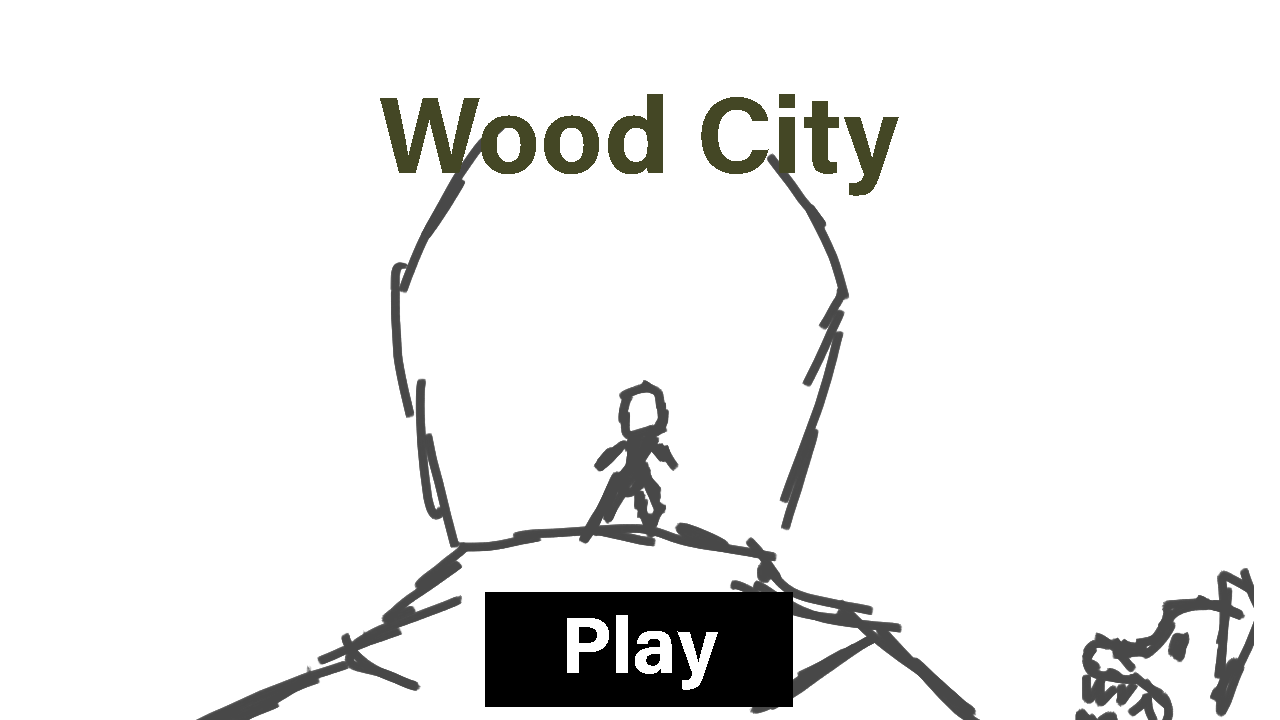
<style>
.page{position:relative;width:1280px;height:720px;background:#ffffff}
.page>*{position:absolute;margin:0}
.t1{font:108.7px "AcuminConcept-Bold";color:#444725}
.t2{font:80.1px "AcuminConcept-Bold";color:#ffffff}
</style>
<div class="page">
<p class="t1" style="left:380px;top:94px;width:519px;height:102px">Wood City</p>
<p class="t2" style="left:567px;top:615px;width:151px;height:75px">Play</p>
</div>
